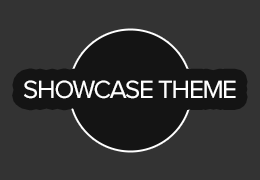
<style>
.page{position:relative;width:260px;height:180px;background:#333333}
.page>*{position:absolute;margin:0}
.t1{font:26px "ProximaNova-Regular";letter-spacing:-0.05em;color:#ffffff;text-transform:uppercase}
</style>
<div class="page">
<p class="t1" style="left:24px;top:80px;width:212px;height:19px">Showcase Theme</p>
</div>
